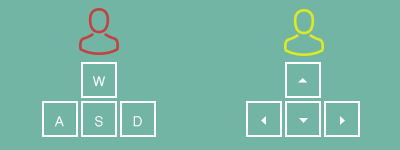
<style>
.page{position:relative;width:400px;height:150px;background:#72b5a4}
.page>*{position:absolute;margin:0}
.t1{font:13px "ShreeDev0714";color:#ffffff}
</style>
<div class="page">
<p class="t1" style="left:93px;top:76px;width:12px;height:11px">W</p>
<p class="t1" style="left:55px;top:116px;width:9px;height:11px">A</p>
<p class="t1" style="left:95px;top:116px;width:8px;height:11px">S</p>
<p class="t1" style="left:133px;top:116px;width:9px;height:11px">D</p>
</div>
